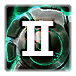
<style>
.page{position:relative;width:76px;height:76px;background:#ffffff}
.page>*{position:absolute;margin:0}
.t1{font:48px "Meiryo-Bold";color:#ffffff}
</style>
<div class="page">
<p class="t1" style="left:22px;top:21px;width:32px;height:35px">Ⅱ</p>
</div>
